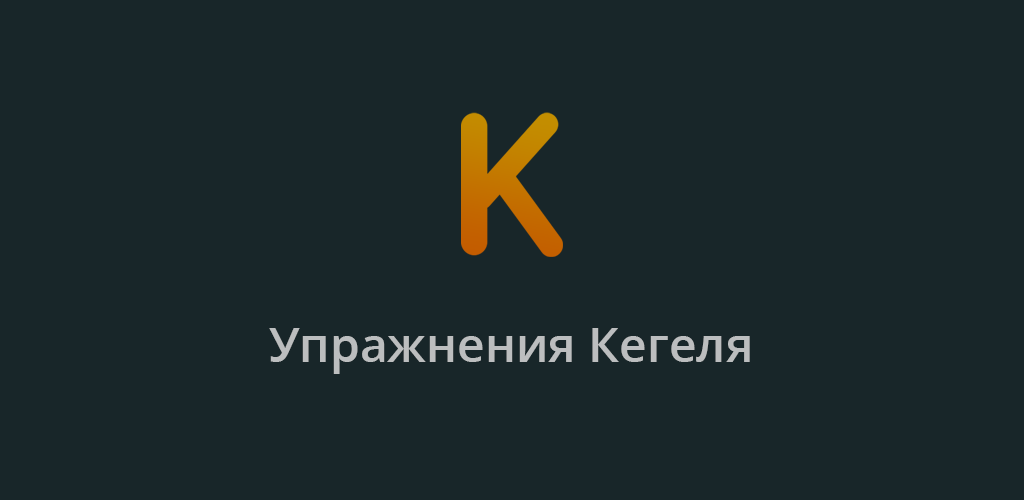
<style>
.page{position:relative;width:1024px;height:500px;background:#182629}
.page>*{position:absolute;margin:0}
.t1{font:48px "OpenSans-SemiBold";color:#bcbebf}
</style>
<div class="page">
<p class="t1" style="left:269px;top:328px;width:481px;height:46px">Упражнения Кегеля</p>
</div>
